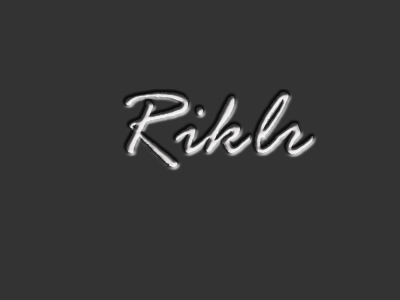
<style>
.page{position:relative;width:400px;height:300px;background:#333333}
.page>*{position:absolute;margin:0}
.t1{font:100px "RageItalic"}
</style>
<div class="page">
<p class="t1" style="left:125px;top:92px;width:189px;height:75px">Riklr</p>
</div>
